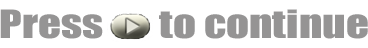
<style>
.page{position:relative;width:368px;height:48px;background:#ffffff}
.page>*{position:absolute;margin:0}
.t1{font:36px "Impact";color:#959494;scale:1.25 1}
</style>
<div class="page">
<p class="t1" style="left:0px;top:9px;width:368px;height:30px">Press       to continue</p>
</div>
